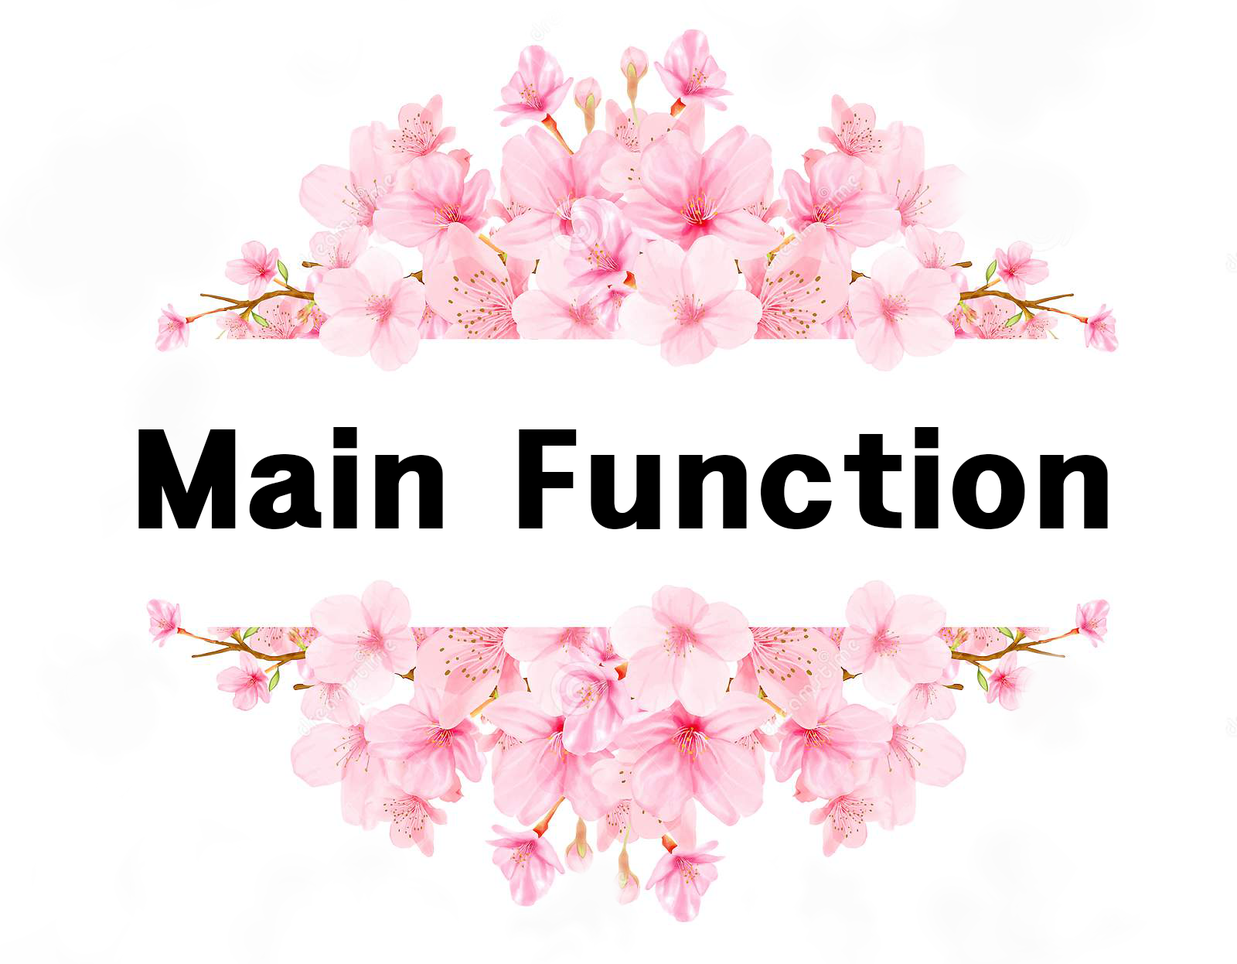
<style>
.page{position:relative;width:1237px;height:964px;background:#ffffff}
.page>*{position:absolute;margin:0}
.t1{font:112.8px "HeadlineR-HM";color:#000000}
</style>
<div class="page">
<p class="t1" style="left:138px;top:427px;width:970px;height:102px">Main Function</p>
</div>
